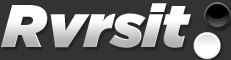
<style>
.page{position:relative;width:231px;height:60px;background:#333333}
.page>*{position:absolute;margin:0}
.t1{font:60px "GothamHTF-UltraItalic"}
</style>
<div class="page">
<p class="t1" style="left:0px;top:3px;width:191px;height:45px">Rvrsit</p>
</div>
